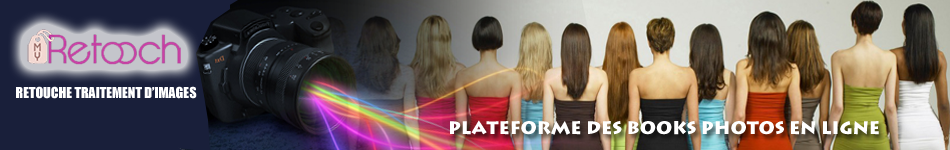
<style>
.page{position:relative;width:950px;height:150px}
.page>*{position:absolute;margin:0}
.t1{font:14px "Impact";color:#ffffff}
.t2{font:18px "LithosPro-Black";color:#ffffff}
</style>
<div class="page">
<p class="t1" style="left:16px;top:86px;width:181px;height:13px">RETOUCHE TRAITEMENT D’IMAGES</p>
<p class="t2" style="left:450px;top:120px;width:429px;height:15px">PLATEFORME DES BOOKS PHOTOS EN LIGNE</p>
</div>
